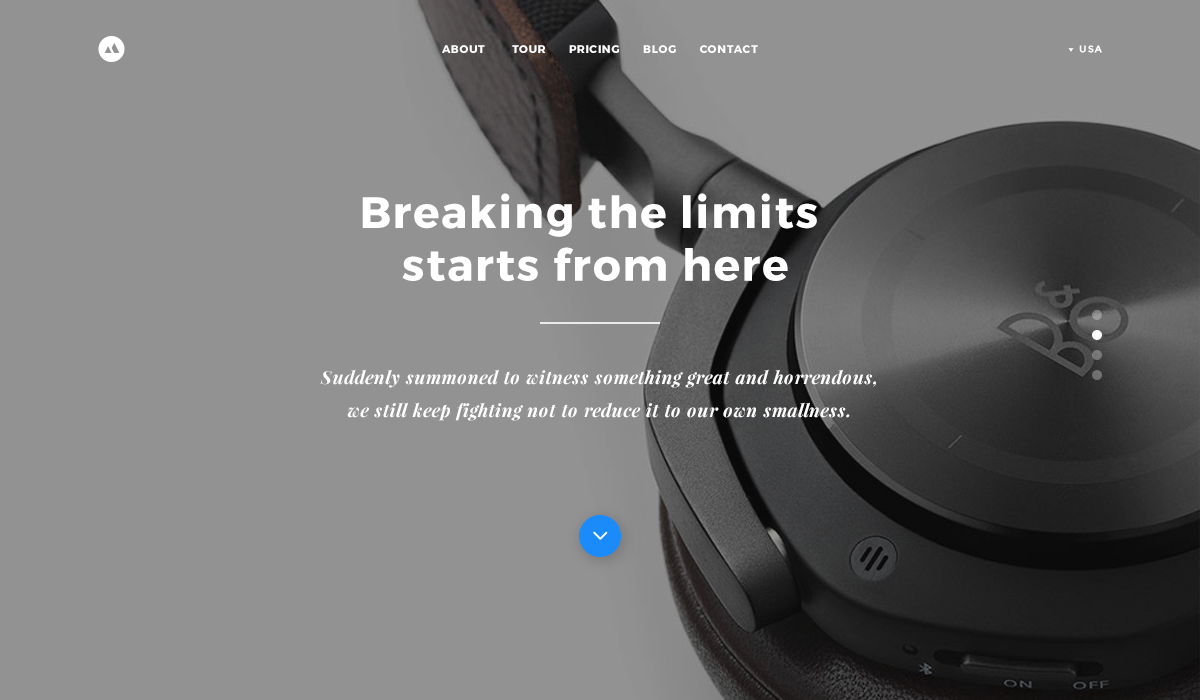
<style>
.page{position:relative;width:1200px;height:700px;background:#929293}
.page>*{position:absolute;margin:0}
.t1{font:11px "Montserrat-Bold";letter-spacing:0.07em;color:#ffffff;text-transform:uppercase}
.t2{font:10px "Montserrat-Bold";letter-spacing:0.08em;color:#ffffff}
.t3{font:44px "Montserrat-Bold";letter-spacing:0.04em;color:#ffffff}
.t4{font:18px/33px "PlayfairDisplay-BoldItalic";letter-spacing:0.03em;color:#ffffff}
</style>
<div class="page">
<p class="t1" style="left:442px;top:45px;width:316px;height:8px">About       Tour      Pricing      Blog      Contact</p>
<p class="t2" style="left:1079px;top:45px;width:23px;height:8px">USA</p>
<p class="t3" style="left:362px;top:193px;width:455px;height:89px;text-align:center">Breaking the limits <br>starts from here</p>
<p class="t4" style="left:320px;top:369px;width:556px;height:52px;text-align:center">Suddenly summoned to witness something great and horrendous, we still keep fighting not to reduce it to our own smallness.</p>
</div>
